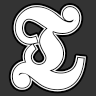
<style>
.page{position:relative;width:96px;height:96px;background:#333333}
.page>*{position:absolute;margin:0}
.t1{font:108.2px "Walbaum-Fraktur-Inline-Bold";color:#ffffff}
</style>
<div class="page">
<p class="t1" style="left:10px;top:5px;width:76px;height:87px">T</p>
</div>
